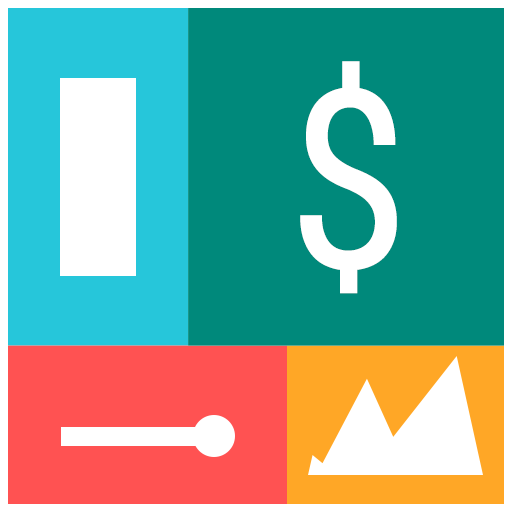
<style>
.page{position:relative;width:512px;height:512px;background:#00897b}
.page>*{position:absolute;margin:0}
.t1{font:250px "RobotoCondensed-Regular";letter-spacing:-0.02em;color:#ffffff}
</style>
<div class="page">
<p class="t1" style="left:300px;top:61px;width:97px;height:233px">$</p>
</div>
